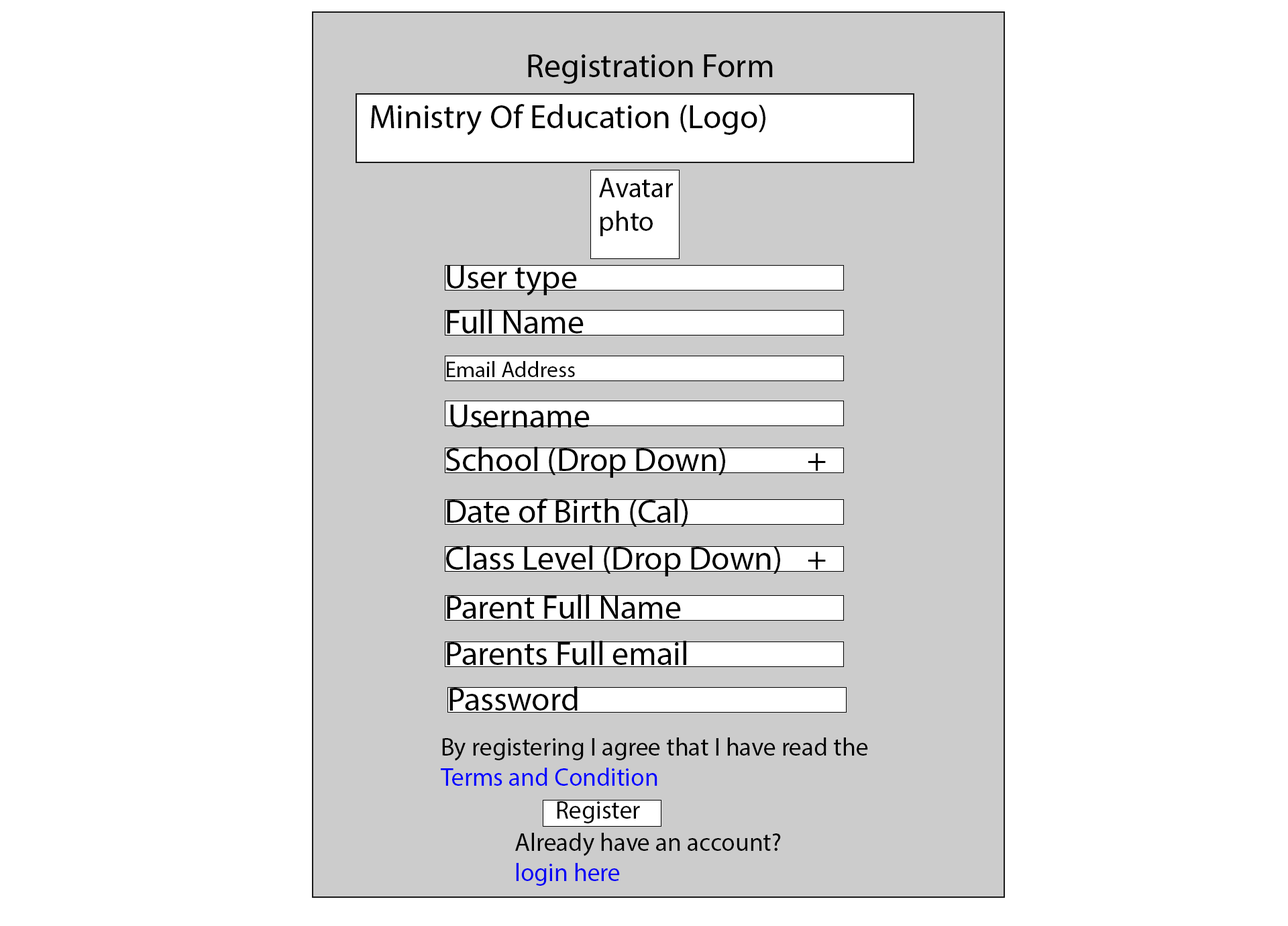
<style>
.page{position:relative;width:1288px;height:926px;background:#ffffff}
.page>*{position:absolute;margin:0}
.t1{font:33.5px "MyriadPro-Regular";color:#000000}
.t2{font:28px "MyriadPro-Regular";color:#000000}
.t3{font:22.4px "MyriadPro-Regular";color:#000000}
.t4{font:25.2px "MyriadPro-Regular";color:#000000}
.t5{font:25.2px "MyriadPro-Regular";color:#0000ff}
.t6{font:25.2px "MyriadPro-Regular";color:#0600f4}
</style>
<div class="page">
<p class="t1" style="left:528px;top:54px;width:245px;height:30px">Registration Form</p>
<p class="t1" style="left:371px;top:104px;width:394px;height:32px">Ministry Of Education (Logo)</p>
<p class="t2" style="left:599px;top:178px;width:74px;height:58px">Avatar phto</p>
<p class="t1" style="left:447px;top:266px;width:130px;height:30px">User type</p>
<p class="t1" style="left:447px;top:309px;width:137px;height:24px">Full Name</p>
<p class="t3" style="left:447px;top:361px;width:128px;height:16px">Email Address</p>
<p class="t1" style="left:450px;top:405px;width:140px;height:22px">Username</p>
<p class="t1" style="left:445px;top:447px;width:381px;height:31px">School (Drop Down)    +</p>
<p class="t1" style="left:447px;top:498px;width:241px;height:29px">Date of Birth (Cal)</p>
<p class="t1" style="left:446px;top:545px;width:380px;height:31px">Class Level (Drop Down)  +</p>
<p class="t1" style="left:447px;top:594px;width:234px;height:25px">Parent Full Name</p>
<p class="t1" style="left:447px;top:641px;width:239px;height:24px">Parents Full email</p>
<p class="t1" style="left:449px;top:686px;width:129px;height:24px">Password</p>
<p class="t4" style="left:441px;top:737px;width:427px;height:49px">By registering I agree that I have read the<br><span class="t5">Terms and Condition</span></p>
<p class="t4" style="left:557px;top:801px;width:83px;height:22px">Register</p>
<p class="t4" style="left:515px;top:833px;width:266px;height:53px">Already have an account?<br><span class="t6">login here</span></p>
</div>
